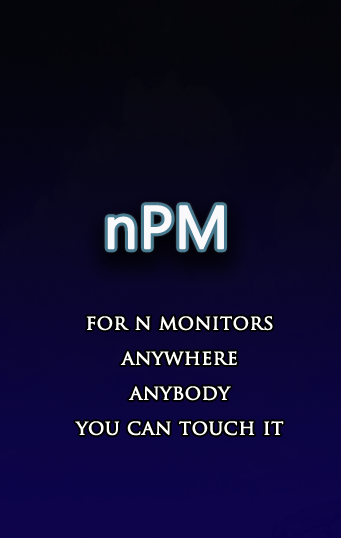
<style>
.page{position:relative;width:341px;height:538px}
.page>*{position:absolute;margin:0}
.t1{font:20px "TrajanPro-Regular";color:#ffffff;font-weight:bold}
</style>
<div class="page">
<p class="t1" style="left:75px;top:316px;width:209px;height:120px;text-align:center">for n monitors<br>anywhere<br>anybody<br>you can touch it</p>
</div>
